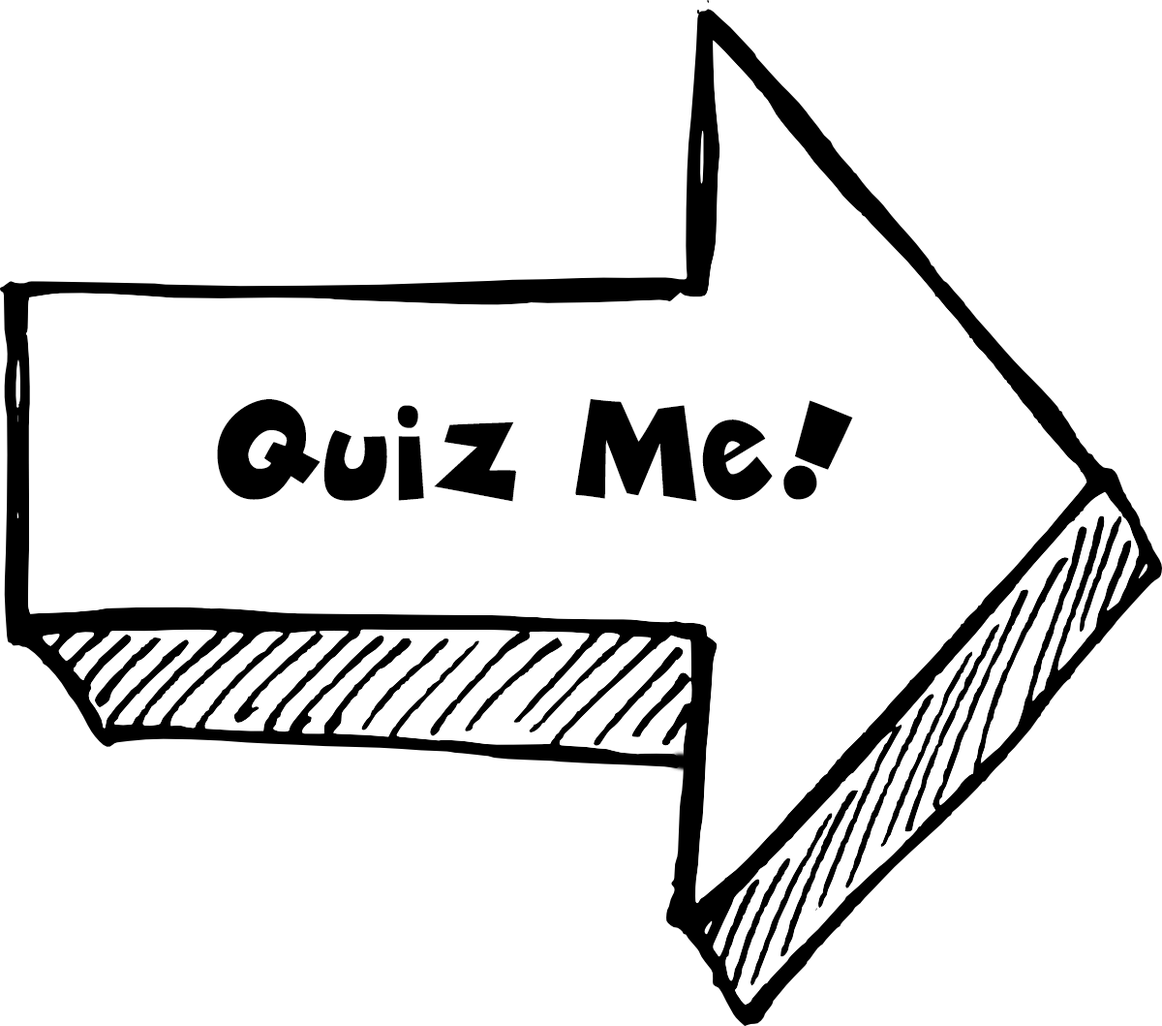
<style>
.page{position:relative;width:1162px;height:1026px;background:#ffffff}
.page>*{position:absolute;margin:0}
.t1{font:144.1px "ZubiloBlack";color:#000000}
</style>
<div class="page">
<p class="t1" style="left:217px;top:398px;width:636px;height:104px">Quiz Me!</p>
</div>
